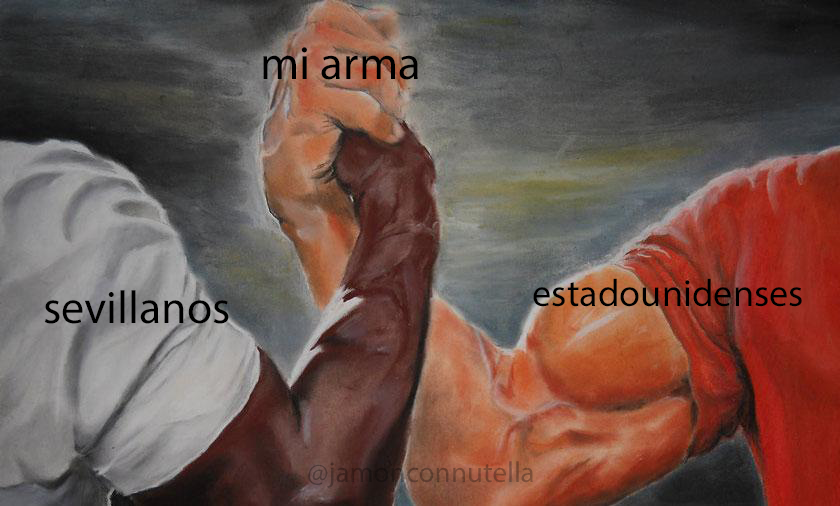
<style>
.page{position:relative;width:840px;height:506px}
.page>*{position:absolute;margin:0}
.t1{font:47.2px "MyriadPro-Regular";color:#000000}
.t2{font:38.3px "MyriadPro-Regular";color:#000000}
.t3{font:46.1px "MyriadPro-Regular";color:#000000}
</style>
<div class="page">
<p class="t1" style="left:263px;top:47px;width:155px;height:33px">mi arma</p>
<p class="t2" style="left:533px;top:278px;width:269px;height:29px">estadounidenses</p>
<p class="t3" style="left:44px;top:290px;width:185px;height:34px">sevillanos</p>
</div>
